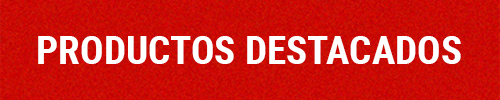
<style>
.page{position:relative;width:500px;height:100px}
.page>*{position:absolute;margin:0}
.t1{font:39.2px "RobotoCondensed-Bold";color:#ffffff}
</style>
<div class="page">
<p class="t1" style="left:38px;top:36px;width:423px;height:28px">PRODUCTOS DESTACADOS</p>
</div>
